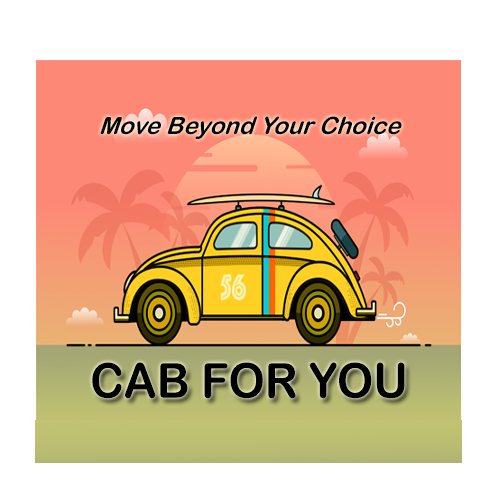
<style>
.page{position:relative;width:504px;height:504px;background:#ffffff}
.page>*{position:absolute;margin:0}
.t1{font:25.3px "ArialRoundedMTBold";color:#000000;scale:0.95 1}
.t2{font:48.4px "ArialRoundedMTBold";color:#000000;scale:0.94 1}
</style>
<div class="page">
<p class="t1" style="left:100px;top:116px;width:302px;height:23px">Move Beyond Your Choice</p>
<p class="t2" style="left:92px;top:362px;width:313px;height:37px">CAB FOR YOU</p>
</div>
